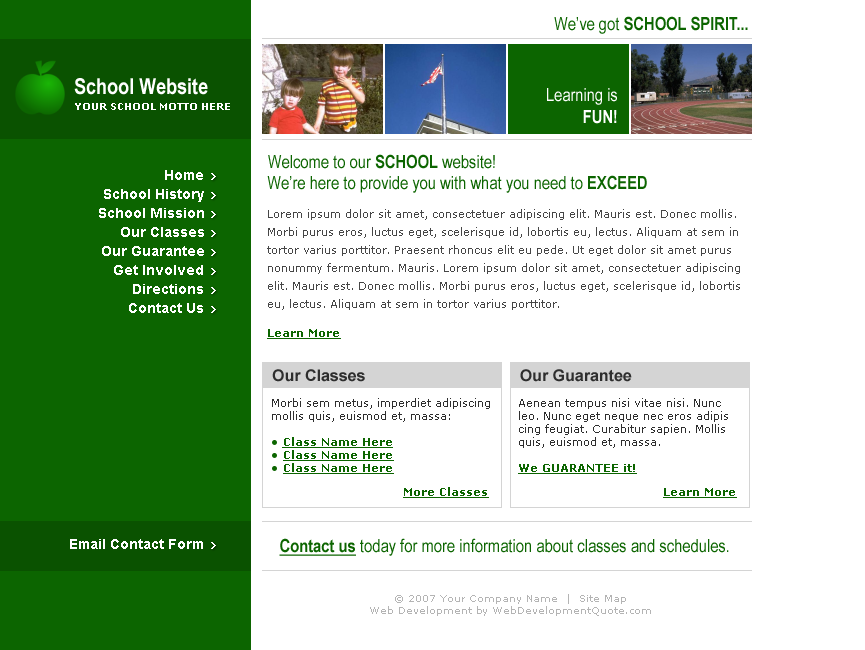
<style>
.page{position:relative;width:865px;height:650px;background:#ffffff}
.page>*{position:absolute;margin:0}
.t1{font:18px "ArialNarrow-Bold";color:#0c6500}
.t2{font:18px "ArialNarrow";color:#0c6500}
.t3{font:22px "ArialNarrow-Bold";color:#ffffff}
.t4{font:18px "ArialNarrow";color:#ffffff}
.t5{font:18px "ArialNarrow-Bold";color:#ffffff}
.t6{font:10px "Verdana-Bold";color:#ffffff}
.t7{font:14px "Arial-BoldMT";color:#ffffff}
.t8{font:11px/18px "Verdana";color:#464646}
.t9{font:11px "Verdana-Bold";color:#0c6500;text-decoration:underline}
.t10{font:16px "Arial-BoldMT";color:#2e2e2e}
.t11{font:11px "Verdana";color:#2e2e2e}
.t12{font:18px "ArialNarrow-Bold";color:#0c6500;text-decoration:underline}
.t13{font:10px "Verdana";color:#b4b4b4}
</style>
<div class="page">
<p class="t1" style="left:554px;top:16px;width:194px;height:18px"><span class="t2">We’ve got </span>SCHOOL SPIRIT...</p>
<p class="t3" style="left:74px;top:78px;width:134px;height:17px">School Website</p>
<p class="t4" style="left:547px;top:88px;width:70px;height:36px;text-align:right">Learning is<br><span class="t5">FUN!</span></p>
<p class="t6" style="left:75px;top:103px;width:155px;height:7px">YOUR SCHOOL MOTTO HERE</p>
<p class="t2" style="left:268px;top:154px;width:227px;height:15px">Welcome to our <span class="t1">SCHOOL </span>website!</p>
<p class="t7" style="left:165px;top:170px;width:38px;height:10px">Home</p>
<p class="t2" style="left:267px;top:175px;width:380px;height:18px">We’re here to provide you with what you need to <span class="t1">EXCEED</span></p>
<p class="t7" style="left:104px;top:189px;width:100px;height:13px">School History</p>
<p class="t7" style="left:99px;top:208px;width:105px;height:10px">School Mission</p>
<p class="t8" style="left:267px;top:209px;width:473px;height:101px">Lorem ipsum dolor sit amet, consectetuer adipiscing elit. Mauris est. Donec mollis. <br>Morbi purus eros, luctus eget, scelerisque id, lobortis eu, lectus. Aliquam at sem in <br>tortor varius porttitor. Praesent rhoncus elit eu pede. Ut eget dolor sit amet purus <br>nonummy fermentum. Mauris. Lorem ipsum dolor sit amet, consectetuer adipiscing <br>elit. Mauris est. Donec mollis. Morbi purus eros, luctus eget, scelerisque id, lobortis <br>eu, lectus. Aliquam at sem in tortor varius porttitor.</p>
<p class="t7" style="left:121px;top:227px;width:83px;height:10px">Our Classes</p>
<p class="t7" style="left:102px;top:246px;width:102px;height:10px">Our Guarantee</p>
<p class="t7" style="left:114px;top:265px;width:89px;height:10px">Get Involved</p>
<p class="t7" style="left:133px;top:284px;width:70px;height:10px">Directions</p>
<p class="t7" style="left:129px;top:303px;width:74px;height:10px">Contact Us</p>
<p class="t9" style="left:267px;top:329px;width:74px;height:10px">Learn More</p>
<p class="t10" style="left:272px;top:369px;width:93px;height:13px">Our Classes</p>
<p class="t10" style="left:520px;top:369px;width:112px;height:13px">Our Guarantee</p>
<p class="t11" style="left:272px;top:398px;width:218px;height:24px">Morbi sem metus, imperdiet adipiscing<br>mollis quis, euismod et, massa:</p>
<p class="t11" style="left:519px;top:398px;width:209px;height:50px">Aenean tempus nisi vitae nisi. Nunc<br>leo. Nunc eget neque nec eros adipis<br>cing feugiat. Curabitur sapien. Mollis<br>quis, euismod et, massa.</p>
<p class="t9" style="left:282px;top:437px;width:111px;height:11px">Class Name Here</p>
<p class="t9" style="left:283px;top:450px;width:111px;height:11px">Class Name Here</p>
<p class="t9" style="left:283px;top:463px;width:111px;height:11px">Class Name Here</p>
<p class="t9" style="left:518px;top:464px;width:119px;height:10px">We GUARANTEE it!</p>
<p class="t9" style="left:403px;top:487px;width:86px;height:11px">More Classes</p>
<p class="t9" style="left:663px;top:488px;width:74px;height:10px">Learn More</p>
<p class="t7" style="left:70px;top:539px;width:133px;height:10px">Email Contact Form</p>
<p class="t2" style="left:279px;top:538px;width:450px;height:18px"><span class="t12">Contact us</span> today for more information about classes and schedules.</p>
<p class="t13" style="left:370px;top:594px;width:281px;height:22px;text-align:center">© 2007 Your Company Name  |  Site Map<br>Web Development by WebDevelopmentQuote.com</p>
</div>
